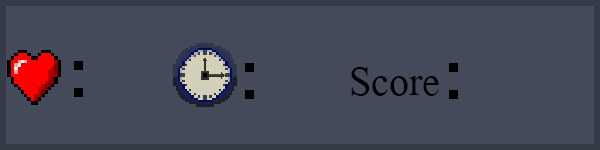
<style>
.page{position:relative;width:600px;height:150px;background:#444a59}
.page>*{position:absolute;margin:0}
.t1{font:60px "Microsoft-Himalaya";color:#000000}
</style>
<div class="page">
<p class="t1" style="left:351px;top:67px;width:88px;height:29px">Score</p>
</div>
